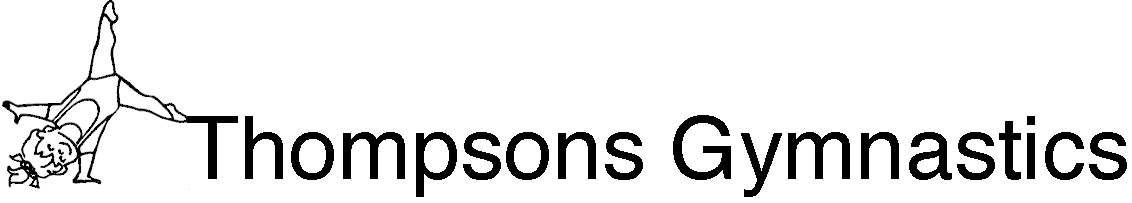
<style>
.page{position:relative;width:1132px;height:203px;background:#ffffff}
.page>*{position:absolute;margin:0}
.t1{font:88px "Helvetica";color:#000000}
</style>
<div class="page">
<p class="t1" style="left:187px;top:115px;width:940px;height:82px">Thompsons Gymnastics</p>
</div>
